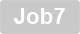
<style>
.page{position:relative;width:80px;height:34px;background:#c9c9c9}
.page>*{position:absolute;margin:0}
.t1{font:22.1px "Arial-BoldMT";color:#ffffff}
</style>
<div class="page">
<p class="t1" style="left:14px;top:8px;width:51px;height:16px">Job7</p>
</div>
